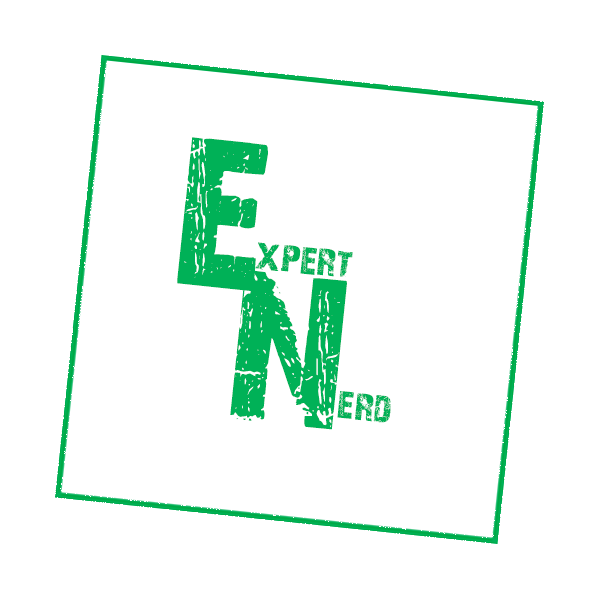
<style>
.page{position:relative;width:600px;height:600px;background:#ffffff}
.page>*{position:absolute;margin:0}
.t1{font:220px "28-Days-Later-Regular";color:#00b157}
.t2{font:40px "28-Days-Later-Regular";color:#00b157}
</style>
<div class="page">
<p class="t1" style="left:177px;top:137px;width:91px;height:155px;rotate:6deg">e</p>
<p class="t2" style="left:255px;top:242px;width:98px;height:35px;rotate:6deg">xpert</p>
<p class="t1" style="left:230px;top:269px;width:117px;height:161px;rotate:6deg">n</p>
<p class="t2" style="left:337px;top:391px;width:54px;height:32px;rotate:6deg">erd</p>
</div>
